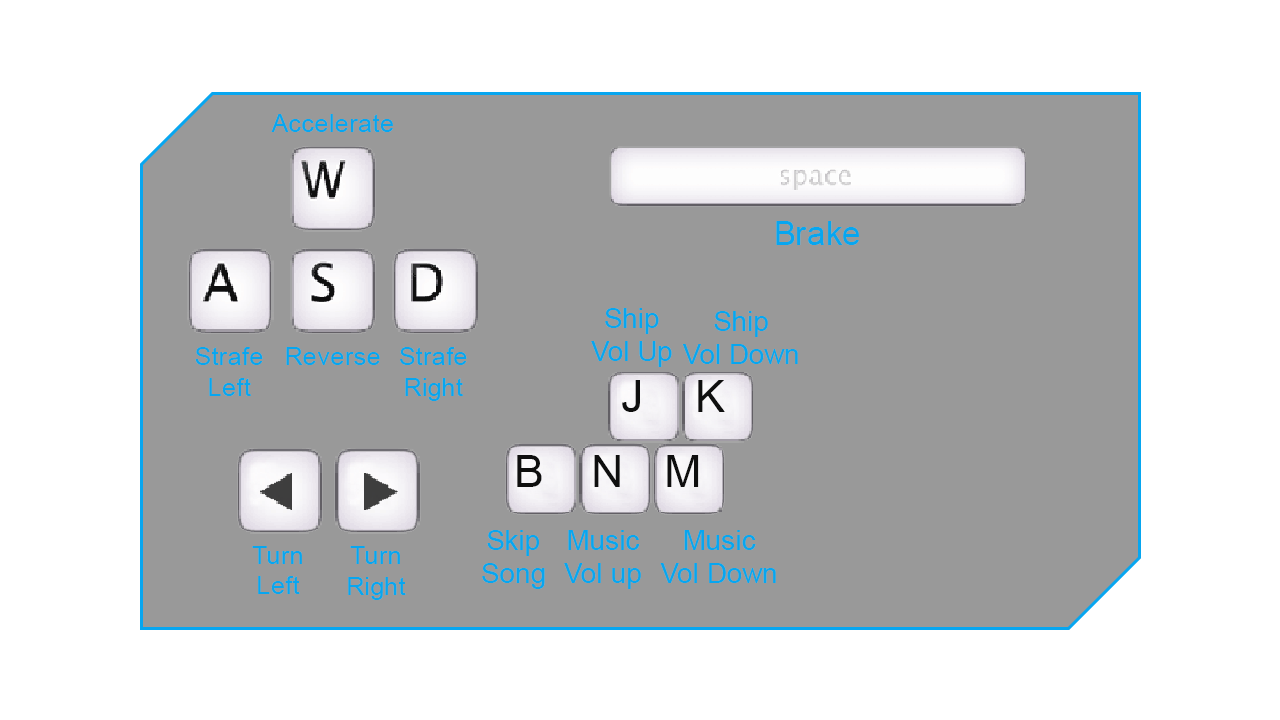
<style>
.page{position:relative;width:1280px;height:720px;background:#999999}
.page>*{position:absolute;margin:0}
.t1{font:25.4px "ArialMT";color:#07a6f0}
.t2{font:33px "ArialMT";color:#07a6f0}
.t3{font:27.5px "ArialMT";color:#07a6f0}
.t4{font:45px "ArialMT";color:#0f0f0f}
</style>
<div class="page">
<p class="t1" style="left:271px;top:114px;width:122px;height:18px">Accelerate</p>
<p class="t2" style="left:776px;top:221px;width:83px;height:24px">Brake</p>
<p class="t3" style="left:591px;top:308px;width:81px;height:59px;text-align:center">Ship<br>Vol Up</p>
<p class="t3" style="left:682px;top:311px;width:116px;height:53px;text-align:center">Ship<br>Vol Down</p>
<p class="t1" style="left:195px;top:347px;width:68px;height:49px;text-align:center">Strafe<br>Left</p>
<p class="t1" style="left:286px;top:347px;width:94px;height:18px">Reverse</p>
<p class="t1" style="left:400px;top:347px;width:67px;height:54px;text-align:center">Strafe<br>Right</p>
<p class="t4" style="left:622px;top:380px;width:18px;height:32px">J</p>
<p class="t4" style="left:698px;top:380px;width:27px;height:32px">K</p>
<p class="t4" style="left:517px;top:455px;width:25px;height:32px">B</p>
<p class="t4" style="left:594px;top:455px;width:26px;height:32px">N</p>
<p class="t4" style="left:667px;top:455px;width:32px;height:32px">M</p>
<p class="t3" style="left:482px;top:530px;width:63px;height:59px;text-align:center">Skip<br>Song</p>
<p class="t3" style="left:564px;top:530px;width:77px;height:59px;text-align:center">Music<br>Vol up</p>
<p class="t3" style="left:660px;top:530px;width:116px;height:53px;text-align:center">Music<br>Vol Down</p>
<p class="t1" style="left:252px;top:546px;width:50px;height:48px;text-align:center">Turn<br>Left</p>
<p class="t1" style="left:348px;top:546px;width:58px;height:54px;text-align:center">Turn<br>Right</p>
</div>
